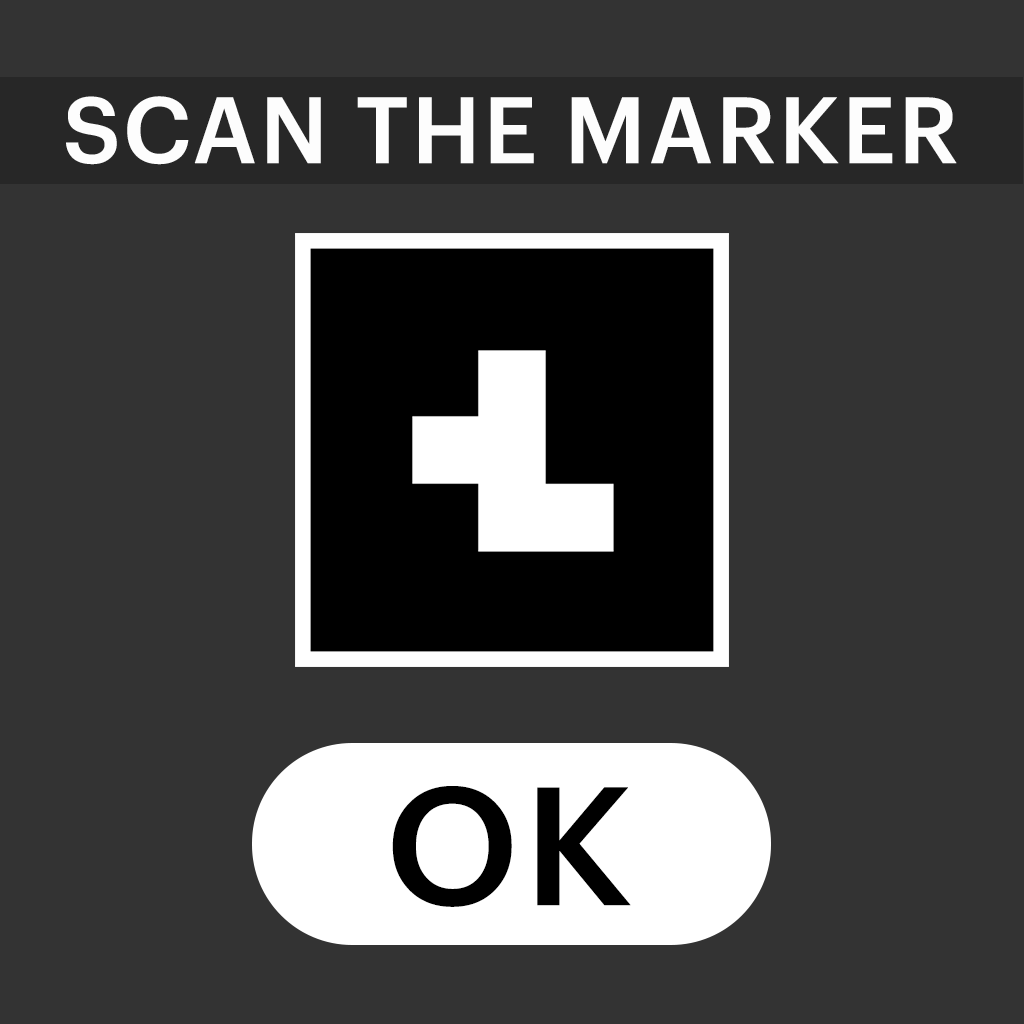
<style>
.page{position:relative;width:1024px;height:1024px;background:#333333}
.page>*{position:absolute;margin:0}
.t1{font:91.6px "GraphikLCG-Medium";color:#fdfdfd;font-weight:bold}
.t2{font:164.1px "GraphikLCG-Medium";color:#000000;font-weight:bold}
</style>
<div class="page">
<p class="t1" style="left:66px;top:96px;width:891px;height:69px">SCAN THE MARKER</p>
<p class="t2" style="left:392px;top:786px;width:239px;height:121px">OK</p>
</div>
